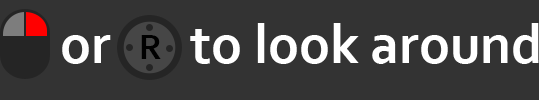
<style>
.page{position:relative;width:539px;height:100px;background:#333333}
.page>*{position:absolute;margin:0}
.t1{font:56px "Corbel-Bold";color:#ffffff}
.t2{font:36px "Corbel-Bold";color:#000000}
</style>
<div class="page">
<p class="t1" style="left:190px;top:23px;width:349px;height:41px">to look around</p>
<p class="t1" style="left:62px;top:35px;width:49px;height:29px">or</p>
<p class="t2" style="left:141px;top:35px;width:20px;height:24px">R</p>
</div>
